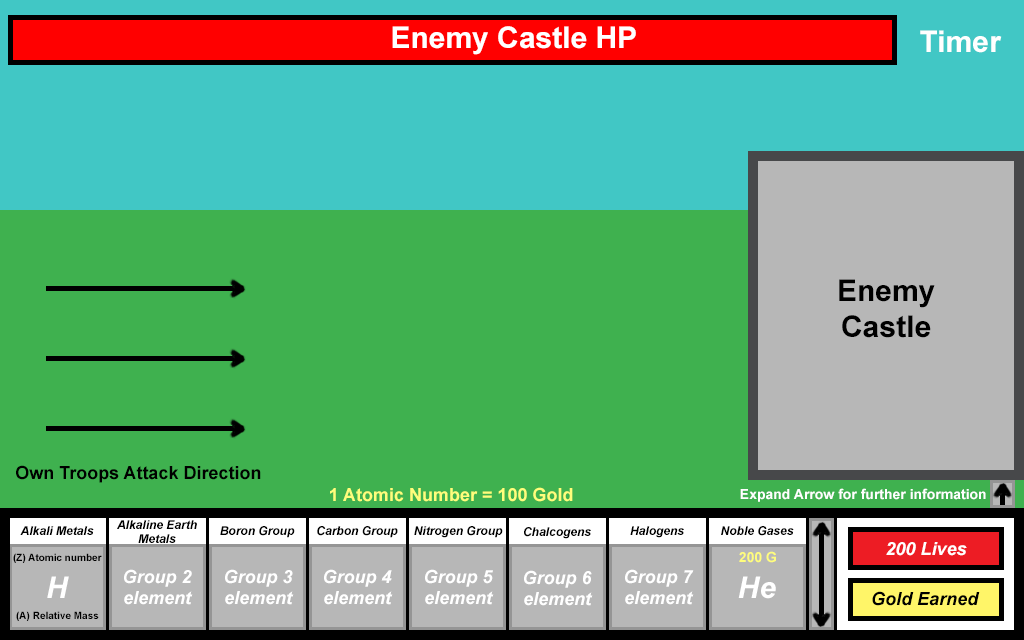
<style>
.page{position:relative;width:1024px;height:640px;background:#3fb14f}
.page>*{position:absolute;margin:0}
.t1{font:30px "Arial-BoldMT";color:#ffffff}
.t2{font:30px "Arial-BoldMT";color:#000000}
.t3{font:18px "Arial-BoldMT";color:#000000}
.t4{font:18px "Arial-BoldMT";color:#fffd7c}
.t5{font:14px "Arial-BoldMT";color:#ffffff}
.t6{font:12px "Arial-BoldItalicMT";color:#000000}
.t7{font:18px "Arial-BoldItalicMT";color:#ffffff}
.t8{font:10px "Arial-BoldMT";color:#010101}
.t9{font:14px "Arial-BoldMT";color:#fffd7c}
.t10{font:30px "Arial-BoldItalicMT";color:#ffffff}
.t11{font:18px "Arial-BoldItalicMT";color:#000000}
.t12{font:10px "Arial-BoldMT";color:#000000}
</style>
<div class="page">
<p class="t1" style="left:392px;top:26px;width:244px;height:29px">Enemy Castle HP</p>
<p class="t1" style="left:920px;top:30px;width:82px;height:23px">Timer</p>
<p class="t2" style="left:839px;top:279px;width:96px;height:59px;text-align:center">Enemy<br>Castle</p>
<p class="t3" style="left:16px;top:465px;width:245px;height:18px">Own Troops Attack Direction</p>
<p class="t4" style="left:330px;top:487px;width:243px;height:15px">1 Atomic Number = 100 Gold</p>
<p class="t5" style="left:740px;top:488px;width:246px;height:14px">Expand Arrow for further information</p>
<p class="t6" style="left:117px;top:520px;width:80px;height:23px;text-align:center">Alkaline Earth<br>Metals</p>
<p class="t6" style="left:20px;top:526px;width:74px;height:9px">Alkali Metals</p>
<p class="t6" style="left:220px;top:526px;width:75px;height:12px">Boron Group</p>
<p class="t6" style="left:317px;top:526px;width:81px;height:12px">Carbon Group</p>
<p class="t6" style="left:414px;top:526px;width:89px;height:12px">Nitrogen Group</p>
<p class="t6" style="left:524px;top:527px;width:67px;height:12px">Chalcogens</p>
<p class="t6" style="left:630px;top:526px;width:54px;height:12px">Halogens</p>
<p class="t6" style="left:721px;top:526px;width:73px;height:10px">Noble Gases</p>
<p class="t7" style="left:886px;top:542px;width:81px;height:14px">200 Lives</p>
<p class="t8" style="left:13px;top:553px;width:89px;height:10px">(Z) Atomic number</p>
<p class="t9" style="left:739px;top:551px;width:37px;height:12px">200 G</p>
<p class="t7" style="left:124px;top:569px;width:69px;height:36px;text-align:center">Group 2<br>element</p>
<p class="t7" style="left:225px;top:569px;width:69px;height:36px;text-align:center">Group 3<br>element</p>
<p class="t7" style="left:324px;top:569px;width:69px;height:36px;text-align:center">Group 4<br>element</p>
<p class="t7" style="left:425px;top:569px;width:69px;height:36px;text-align:center">Group 5<br>element</p>
<p class="t7" style="left:625px;top:569px;width:69px;height:36px;text-align:center">Group 7<br>element</p>
<p class="t10" style="left:47px;top:576px;width:22px;height:22px">H</p>
<p class="t7" style="left:524px;top:570px;width:69px;height:36px;text-align:center">Group 6<br>element</p>
<p class="t10" style="left:738px;top:576px;width:38px;height:23px">He</p>
<p class="t11" style="left:872px;top:591px;width:108px;height:15px">Gold Earned</p>
<p class="t12" style="left:16px;top:611px;width:83px;height:10px">(A) Relative Mass</p>
</div>
